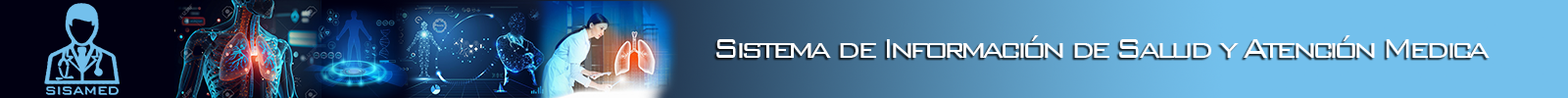
<style>
.page{position:relative;width:1568px;height:98px}
.page>*{position:absolute;margin:0}
.t1{font:35.3px "BankGothicBT-Light";letter-spacing:-0.13em;color:#ffffff}
</style>
<div class="page">
<p class="t1" style="left:716px;top:35px;width:774px;height:23px">Sistema de Información de Salud y Atención Medica</p>
</div>
